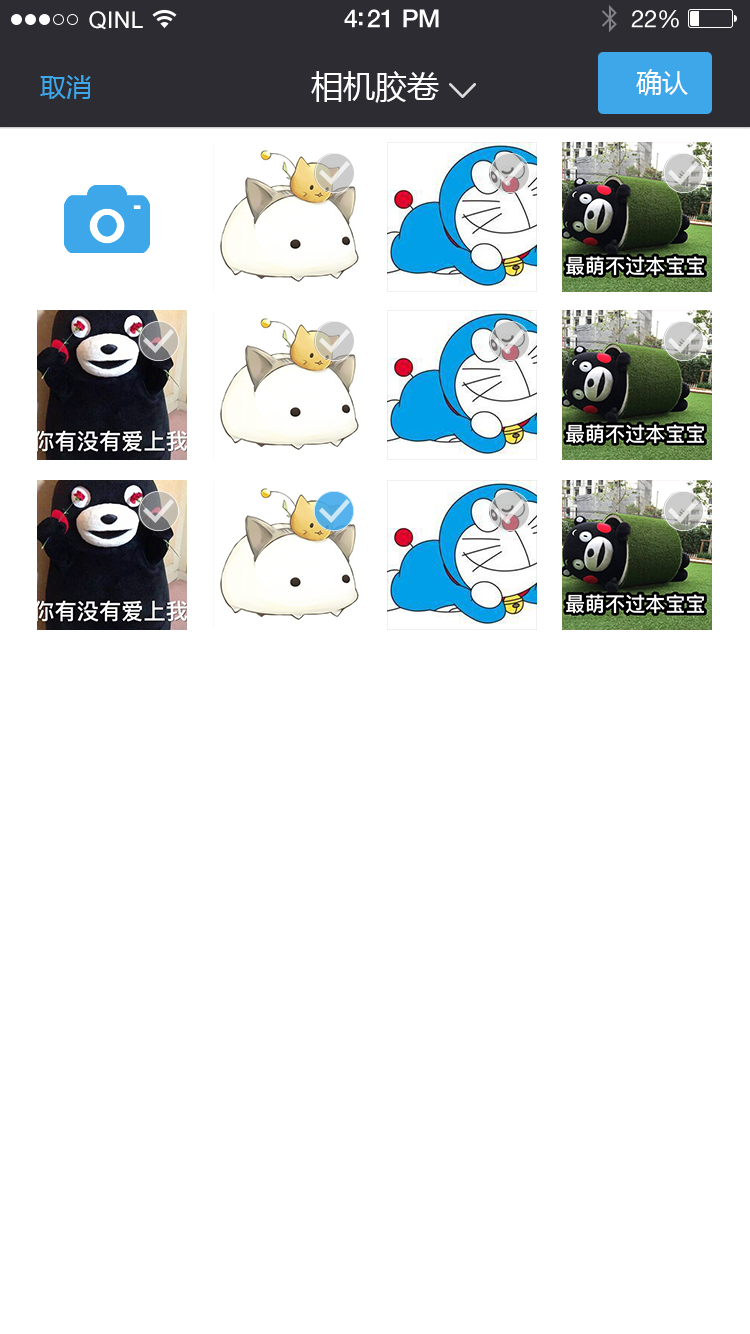
<style>
.page{position:relative;width:750px;height:1334px;background:#ffffff}
.page>*{position:absolute;margin:0}
.t1{font:23px "ArialUnicodeMS";letter-spacing:0.02em;color:#ffffff}
.t2{font:25px "HelveticaNeue-Medium";letter-spacing:-0.02em;color:#ffffff}
.t3{font:24px "HelveticaNeue";letter-spacing:-0.02em;color:#ffffff}
.t4{font:26px "MicrosoftYaHei";color:#3da7ea}
.t5{font:32px "MicrosoftYaHei";color:#ffffff}
.t6{font:26px "MicrosoftYaHei";color:#ffffff}
</style>
<div class="page">
<p class="t1" style="left:89px;top:11px;width:54px;height:19px">QINL</p>
<p class="t1" style="left:89px;top:11px;width:54px;height:19px">QINL</p>
<p class="t2" style="left:344px;top:9px;width:95px;height:19px">4:21 PM</p>
<p class="t2" style="left:344px;top:9px;width:95px;height:19px">4:21 PM</p>
<p class="t3" style="left:631px;top:10px;width:48px;height:18px">22%</p>
<p class="t3" style="left:631px;top:10px;width:48px;height:18px">22%</p>
<p class="t4" style="left:40px;top:75px;width:51px;height:24px">取消</p>
<p class="t5" style="left:311px;top:71px;width:128px;height:32px">相机胶卷</p>
<p class="t5" style="left:311px;top:71px;width:128px;height:32px">相机胶卷</p>
<p class="t6" style="left:636px;top:69px;width:52px;height:27px">确认</p>
<p class="t6" style="left:636px;top:69px;width:52px;height:27px">确认</p>
</div>
